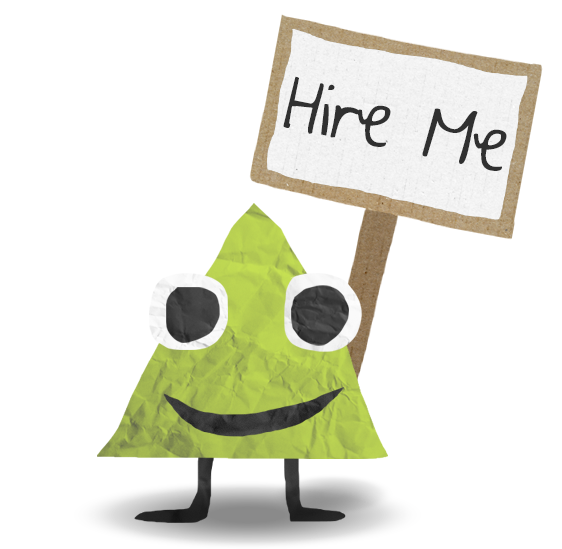
<style>
.page{position:relative;width:562px;height:549px;background:#ffffff}
.page>*{position:absolute;margin:0}
.t1{font:70px "AYearWithoutRain";color:#303030}
</style>
<div class="page">
<p class="t1" style="left:283px;top:76px;width:224px;height:95px;rotate:11deg">Hire Me</p>
</div>
